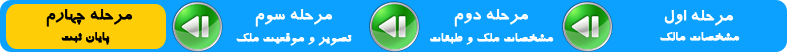
<style>
.page{position:relative;width:787px;height:52px;background:#0ca1ff}
.page>*{position:absolute;margin:0}
.t1{font:18px "BTraffic";color:#000000;font-weight:bold}
.t2{font:18px "BTraffic";color:#ffffff;font-weight:bold}
.t3{font:14px "BTraffic";color:#000000;font-weight:bold}
.t4{font:14px "BTraffic";color:#ffffff;font-weight:bold}
</style>
<div class="page">
<p class="t1" style="left:46px;top:9px;width:87px;height:18px">مرحله چهارم</p>
<p class="t2" style="left:255px;top:9px;width:78px;height:18px">مرحله سوم</p>
<p class="t2" style="left:454px;top:9px;width:75px;height:18px">مرحله دوم</p>
<p class="t2" style="left:664px;top:10px;width:70px;height:16px">مرحله اول</p>
<p class="t3" style="left:61px;top:32px;width:49px;height:13px">پایان ثبت</p>
<p class="t4" style="left:236px;top:33px;width:116px;height:13px">تصویر و موقعیت ملک</p>
<p class="t4" style="left:430px;top:33px;width:124px;height:12px">مشخصات ملک و طبقات</p>
<p class="t4" style="left:660px;top:32px;width:80px;height:9px">مشخصات مالک</p>
</div>
